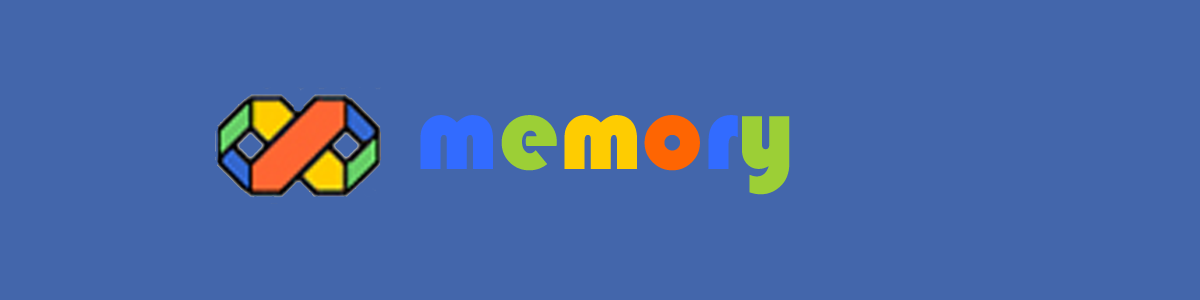
<style>
.page{position:relative;width:1200px;height:300px;background:#4366ab}
.page>*{position:absolute;margin:0}
.t1{font:108px "STHupo";color:#326bff}
.t2{font:108px "STHupo";color:#9ccf36}
.t3{font:108px "STHupo";color:#fecc01}
.t4{font:108px "STHupo";color:#fe6502}
</style>
<div class="page">
<p class="t1" style="left:420px;top:115px;width:370px;height:80px">m<span class="t2">e</span><span class="t3">m</span><span class="t4">o</span>r<span class="t2">y</span></p>
</div>
